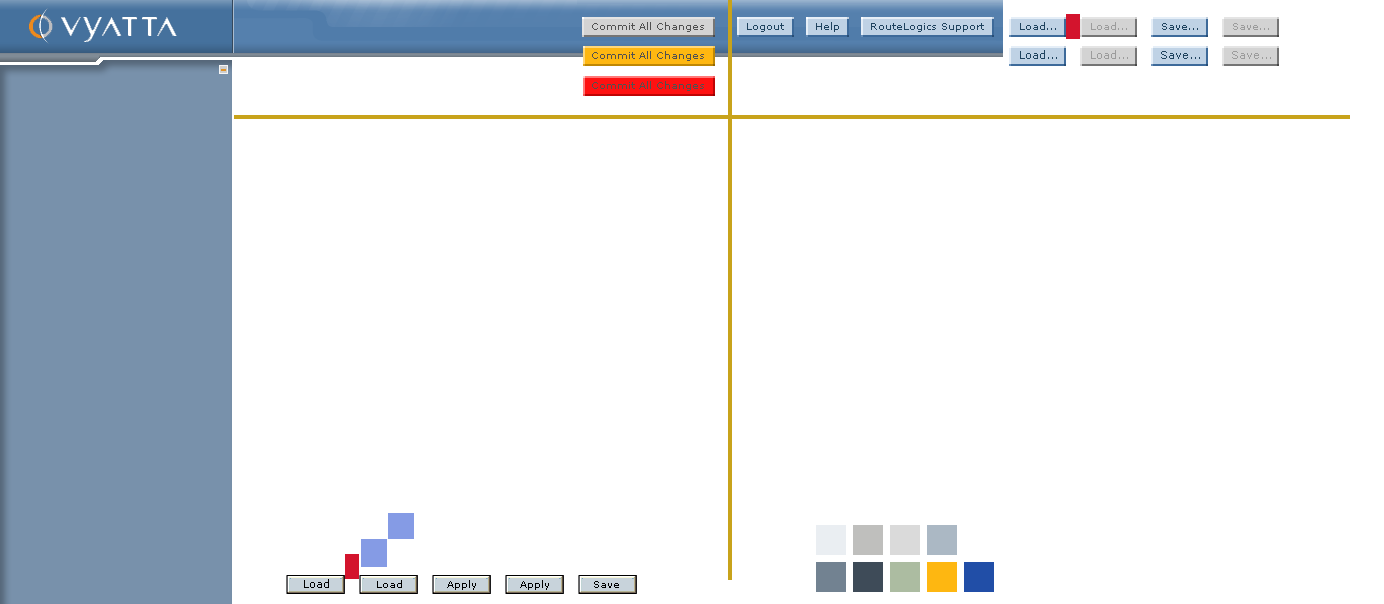
<style>
.page{position:relative;width:1384px;height:604px;background:#ffffff}
.page>*{position:absolute;margin:0}
.t1{font:10px "Verdana";color:#515151}
.t2{font:10px "Verdana";color:#1f435f}
.t3{font:10px "Verdana";color:#9c9c9c}
.t4{font:10px "Verdana";color:#000000}
</style>
<div class="page">
<p class="t1" style="left:592px;top:22px;width:112px;height:10px">Commit All Changes</p>
<p class="t2" style="left:747px;top:23px;width:37px;height:9px">Logout</p>
<p class="t2" style="left:816px;top:22px;width:23px;height:10px">Help</p>
<p class="t2" style="left:871px;top:23px;width:113px;height:9px">RouteLogics Support</p>
<p class="t2" style="left:1020px;top:22px;width:36px;height:8px">Load...</p>
<p class="t3" style="left:1091px;top:22px;width:36px;height:8px">Load...</p>
<p class="t2" style="left:1162px;top:23px;width:36px;height:7px">Save...</p>
<p class="t3" style="left:1233px;top:23px;width:36px;height:7px">Save...</p>
<p class="t1" style="left:592px;top:51px;width:112px;height:10px">Commit All Changes</p>
<p class="t1" style="left:592px;top:81px;width:112px;height:10px">Commit All Changes</p>
<p class="t4" style="left:377px;top:580px;width:25px;height:8px">Load</p>
<p class="t4" style="left:520px;top:580px;width:29px;height:10px">Apply</p>
</div>
